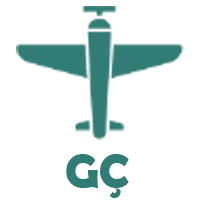
<style>
.page{position:relative;width:200px;height:200px;background:#ffffff}
.page>*{position:absolute;margin:0}
.t1{font:48px "BerlinSansFBDemi-Bold";color:#317c75}
</style>
<div class="page">
<p class="t1" style="left:66px;top:154px;width:63px;height:44px">GÇ</p>
</div>
